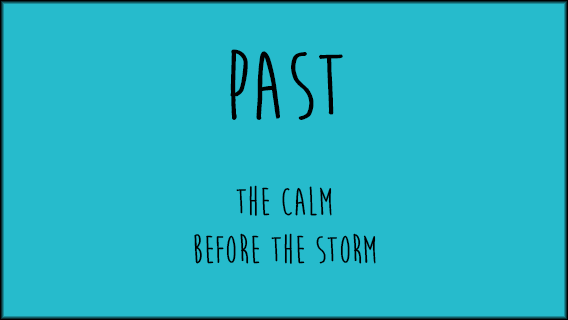
<style>
.page{position:relative;width:568px;height:320px;background:#26bbcc}
.page>*{position:absolute;margin:0}
.t1{font:40px "MoonFlowerBold";color:#000000}
.t2{font:100px "MoonFlowerBold";color:#000000}
</style>
<div class="page">
<p class="t1" style="left:194px;top:49px;width:182px;height:215px;text-align:center"><span class="t2">PAST</span><br><br>The Calm <br>Before the Storm</p>
</div>
